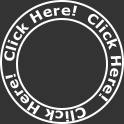
<style>
.page{position:relative;width:124px;height:124px;background:#333333}
.page>*{position:absolute;margin:0}
.t1{font:13.8px "Verdana-Bold";color:#ffffff;scale:1.07 1}
</style>
<div class="page">
<p class="t1" style="left:4px;top:5px;width:118px;height:117px;text-align:center">Click Here!  Click Here!  Click Here!</p>
</div>
